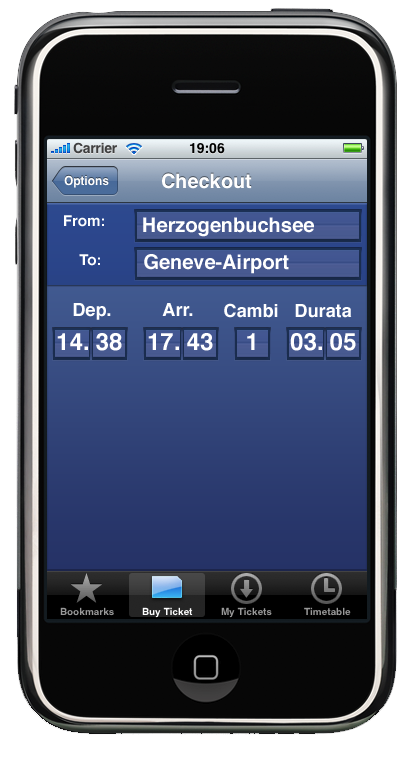
<style>
.page{position:relative;width:414px;height:770px}
.page>*{position:absolute;margin:0}
.t1{font:15px "Helvetica-Bold";color:#ffffff}
.t2{font:20px "Helvetica-Bold";color:#ffffff}
.t3{font:18px "Helvetica-Bold";color:#ffffff}
.t4{font:24px "Helvetica-Bold";color:#ffffff}
</style>
<div class="page">
<p class="t1" style="left:64px;top:215px;width:40px;height:12px">From:</p>
<p class="t2" style="left:143px;top:217px;width:171px;height:20px">Herzogenbuchsee</p>
<p class="t1" style="left:79px;top:254px;width:21px;height:12px">To:</p>
<p class="t2" style="left:144px;top:254px;width:145px;height:20px">Geneve-Airport</p>
<p class="t3" style="left:73px;top:303px;width:38px;height:17px">Dep.</p>
<p class="t3" style="left:162px;top:303px;width:31px;height:13px">Arr.</p>
<p class="t3" style="left:224px;top:303px;width:54px;height:15px">Cambi</p>
<p class="t3" style="left:295px;top:304px;width:57px;height:14px">Durata</p>
<p class="t4" style="left:57px;top:333px;width:31px;height:17px">14.</p>
<p class="t4" style="left:96px;top:333px;width:26px;height:18px">38</p>
<p class="t4" style="left:148px;top:333px;width:31px;height:17px">17.</p>
<p class="t4" style="left:187px;top:333px;width:26px;height:18px">43</p>
<p class="t4" style="left:247px;top:333px;width:8px;height:17px">1</p>
<p class="t4" style="left:290px;top:333px;width:32px;height:18px">03.</p>
<p class="t4" style="left:330px;top:333px;width:26px;height:18px">05</p>
</div>
